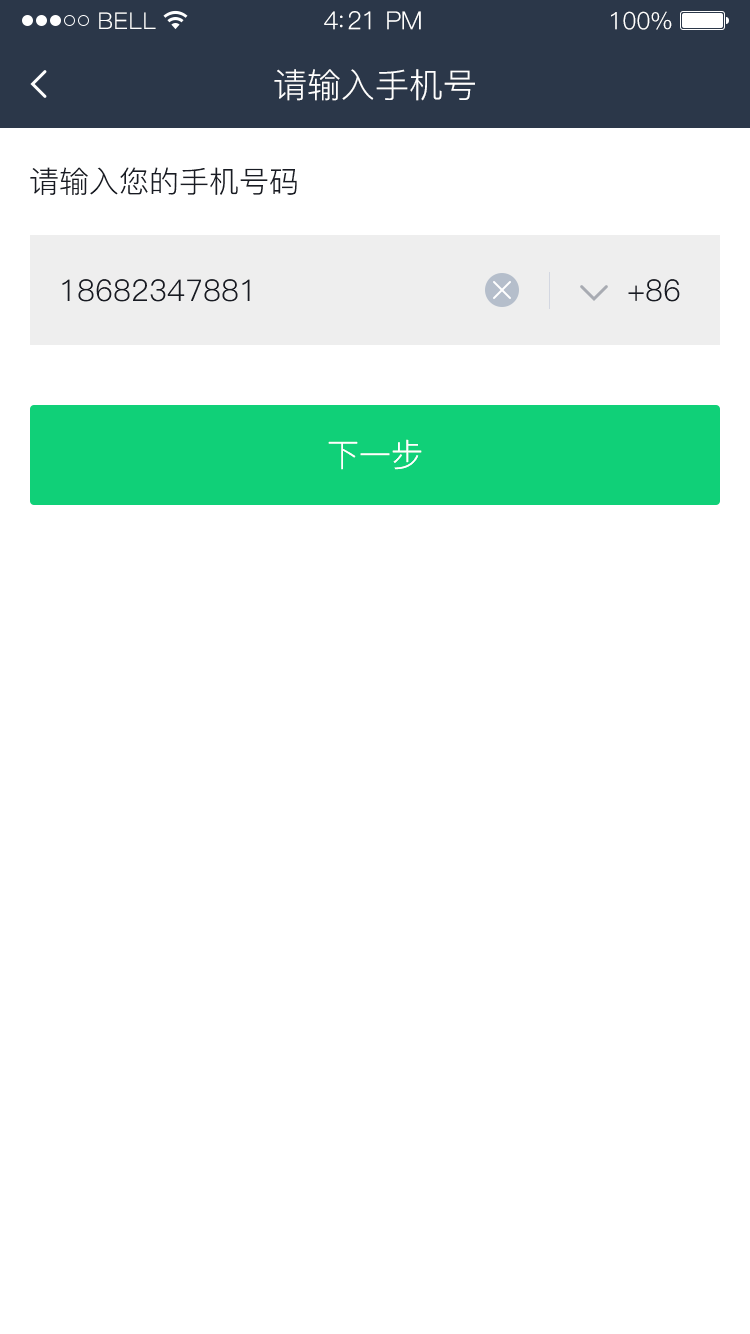
<style>
.page{position:relative;width:750px;height:1334px;background:#ffffff}
.page>*{position:absolute;margin:0}
.t1{font:23px "PingFang-SC-Regular";letter-spacing:0.02em;color:#ffffff}
.t2{font:25px "PingFang-SC-Regular";letter-spacing:-0.02em;color:#ffffff}
.t3{font:24px "PingFang-SC-Regular";letter-spacing:-0.02em;color:#ffffff}
.t4{font:34px "PingFang-SC-Regular";color:#ffffff}
.t5{font:30px "PingFang-SC-Regular";color:#181b23}
.t6{font:32px "PingFang-SC-Regular";color:#ffffff}
</style>
<div class="page">
<p class="t1" style="left:99px;top:12px;width:57px;height:17px">BELL</p>
<p class="t2" style="left:324px;top:11px;width:97px;height:19px">4:21 PM</p>
<p class="t3" style="left:611px;top:11px;width:61px;height:19px">100%</p>
<p class="t4" style="left:274px;top:69px;width:201px;height:32px">请输入手机号</p>
<p class="t5" style="left:30px;top:167px;width:267px;height:28px">请输入您的手机号码</p>
<p class="t5" style="left:62px;top:279px;width:188px;height:23px">18682347881</p>
<p class="t5" style="left:628px;top:279px;width:52px;height:23px">+86</p>
<p class="t6" style="left:328px;top:439px;width:94px;height:31px">下一步</p>
</div>
